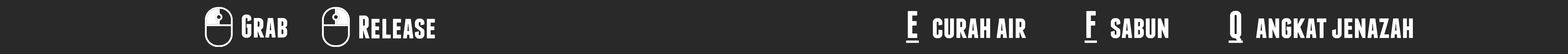
<style>
.page{position:relative;width:1568px;height:54px;background:#292929}
.page>*{position:absolute;margin:0}
.t1{font:32.6px "Franchise-Bold";color:#fefefe}
.t2{font:38.3px "Franchise-Bold";color:#fefefe;text-decoration:underline}
</style>
<div class="page">
<p class="t1" style="left:906px;top:11px;width:120px;height:32px"><span class="t2">E</span>   curah air</p>
<p class="t1" style="left:1084px;top:11px;width:84px;height:32px"><span class="t2">F</span>   sabun</p>
<p class="t1" style="left:1229px;top:11px;width:184px;height:32px"><span class="t2">Q</span>   angkat jenazah</p>
</div>
